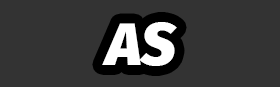
<style>
.page{position:relative;width:280px;height:87px;background:#333333}
.page>*{position:absolute;margin:0}
.t1{font:60px "FiraSans-BlackItalic";color:#ffffff}
</style>
<div class="page">
<p class="t1" style="left:102px;top:22px;width:75px;height:44px">AS</p>
</div>
